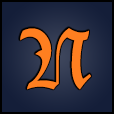
<style>
.page{position:relative;width:114px;height:114px}
.page>*{position:absolute;margin:0}
.t1{font:80px "LucidaBlackletter";color:#ff7f20}
</style>
<div class="page">
<p class="t1" style="left:20px;top:28px;width:71px;height:62px">N</p>
</div>
